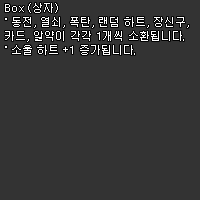
<style>
.page{position:relative;width:200px;height:200px;background:#333333}
.page>*{position:absolute;margin:0}
.t1{font:11px/14px "Dotum";color:#ffffff}
</style>
<div class="page">
<p class="t1" style="left:5px;top:3px;width:184px;height:52px">Box (상자)<br>˚ 동전, 열쇠, 폭탄, 랜덤 하트, 장신구,<br>카드, 알약이 각각 1개씩 소환됩니다.<br>˚ 소울 하트 +1 증가됩니다.</p>
</div>
